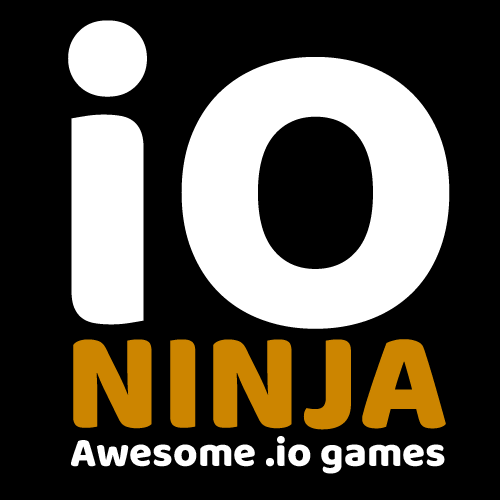
<style>
.page{position:relative;width:500px;height:500px;background:#000000}
.page>*{position:absolute;margin:0}
.t1{font:422.5px "Baloo-Regular";color:#ffffff}
.t2{font:142.3px "Baloo-Regular";color:#cc8500}
.t3{font:42.1px "Baloo-Regular";color:#ffffff}
</style>
<div class="page">
<p class="t1" style="left:68px;top:20px;width:382px;height:309px">iO</p>
<p class="t2" style="left:73px;top:339px;width:373px;height:91px">NINJA</p>
<p class="t3" style="left:71px;top:436px;width:374px;height:38px">Awesome .io games</p>
</div>
